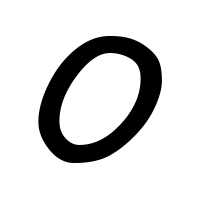
<style>
.page{position:relative;width:200px;height:200px;background:#ffffff}
.page>*{position:absolute;margin:0}
.t1{font:170px "SegoePrint-Bold";color:#000000}
</style>
<div class="page">
<p class="t1" style="left:38px;top:36px;width:124px;height:127px">O</p>
</div>
